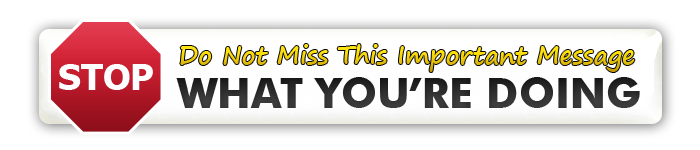
<style>
.page{position:relative;width:700px;height:150px;background:#ffffff}
.page>*{position:absolute;margin:0}
.t1{font:24.7px "SegoePrint-Bold";color:#f5d40a}
.t2{font:35.9px "Tahoma-Bold";color:#ffffff}
.t3{font:42px "FuturaBT-Bold";color:#2d2d2d}
</style>
<div class="page">
<p class="t1" style="left:180px;top:44px;width:455px;height:28px">Do Not Miss This Important Message</p>
<p class="t2" style="left:59px;top:64px;width:94px;height:26px">STOP</p>
<p class="t3" style="left:176px;top:77px;width:464px;height:31px">WHAT YOU’RE DOING</p>
</div>
